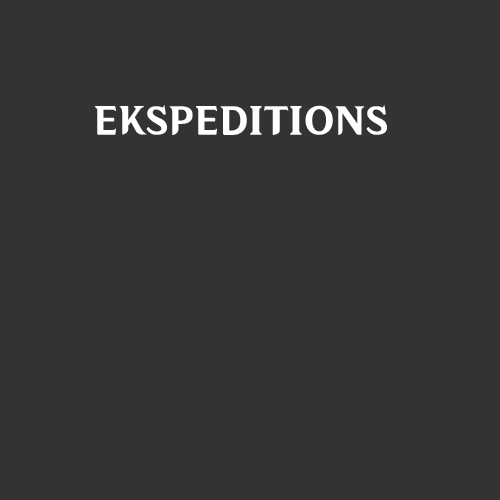
<style>
.page{position:relative;width:500px;height:500px;background:#333333}
.page>*{position:absolute;margin:0}
.t1{font:36px "Default_SC-85W";color:#ffffff}
</style>
<div class="page">
<p class="t1" style="left:94px;top:105px;width:293px;height:31px">EKSPEDITIONS</p>
</div>
